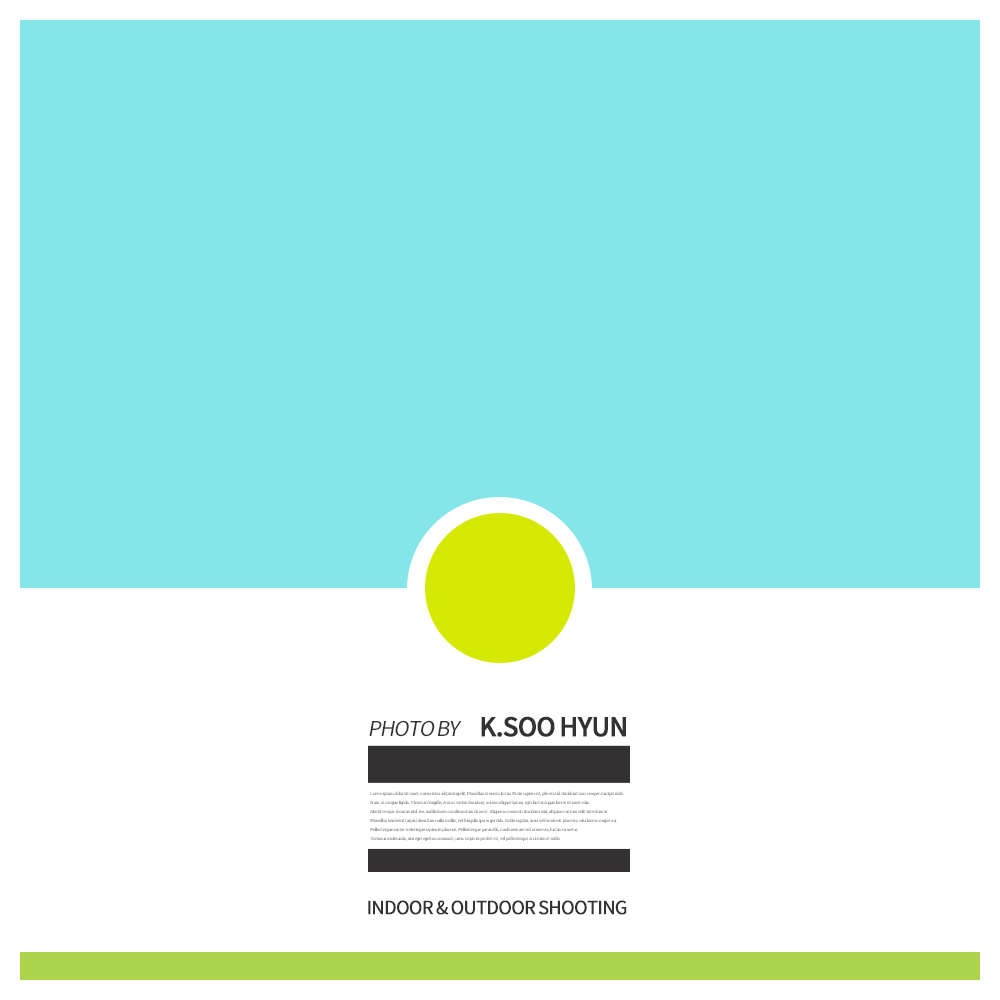
<style>
.page{position:relative;width:1000px;height:1000px;background:#84e6e9}
.page>*{position:absolute;margin:0}
.t1{font:20.6px "SourceHanSansKR-Regular";letter-spacing:-0.05em;color:#333131;font-style:italic}
.t2{font:25.7px "SourceHanSansKR-Medium";letter-spacing:-0.05em;color:#333131;font-weight:bold}
.t3{font:4.5px/8.9px "IropkeBatangM";letter-spacing:-0.04em}
.t4{font:18px "SourceHanSansKR-Regular";letter-spacing:-0.05em;color:#333131;font-weight:bold}
</style>
<div class="page">
<p class="t1" style="left:369px;top:720px;width:93px;height:17px">PHOTO BY</p>
<p class="t2" style="left:481px;top:716px;width:145px;height:21px">K.SOO HYUN</p>
<p class="t3" style="left:370px;top:791px;width:254px;height:50px">Lorem ipsum dolor sit amet, consectetur adipiscing elit. Phasellus at massa lectus. Proin sapien est, placerat id tincidunt non, semper suscipit nibh. <br>Nunc at congue ligula. Vivamus fringilla, eros ac varius tincidunt, mi sem aliquet ipsum, eget luctus augue lorem sit amet odio. <br>Morbi tempor rhoncus nisl, nec mollis lorem condimentum sit amet. Aliquam commodo tincidunt nisi, aliquam rutrum velit interdum ut. <br>Phasellus hendrerit turpis bibendum nulla mollis, vel fringilla quam gravida. Nulla sagittis, urna vel hendrerit pharetra, nisi lorem congue mi, <br>Pellentesque auctor scelerisque sapien in placerat. Pellentesque purus elit, condimentum sed ornare eu, luctus eu metus. <br>Vivamus malesuada, nisi eget egestas commodo, urna turpis imperdiet est, vel pellentesque orci enim et nulla.</p>
<p class="t4" style="left:368px;top:900px;width:259px;height:15px">INDOOR &amp; OUTDOOR SHOOTING</p>
</div>
